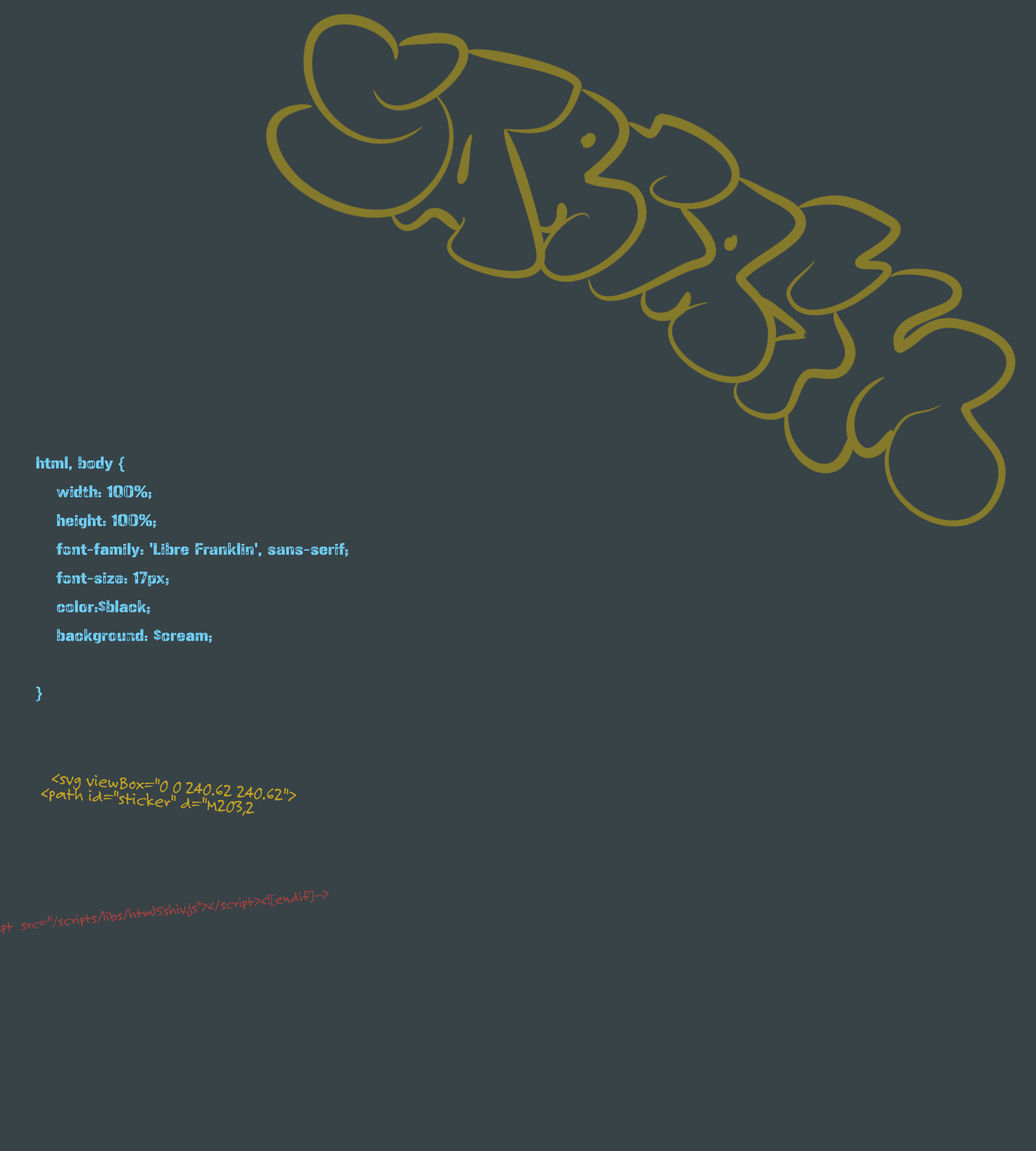
<style>
.page{position:relative;width:1036px;height:1151px;background:#384347}
.page>*{position:absolute;margin:0}
.t1{font:14.5px/27.6px "GunplayDamage-Regular";color:#71cff6;scale:1.11 1}
.t2{font:18.4px/15.4px "FeltTipRoman";color:#c2a223}
</style>
<div class="page">
<p class="t1" style="left:36px;top:456px;width:312px;height:246px">html, body {<br> width: 100%;<br> height: 100%;<br> font-family: 'Libre Franklin', sans-serif;<br> font-size: 17px;<br> color:$black;<br> background: $cream;<br><br>}</p>
<p class="t2" style="left:41px;top:774px;width:255px;height:42px;rotate:4deg">&lt;svg viewBox="0 0 240.62 240.62"&gt;<br>&lt;path id="sticker" d="M203,2</p>
</div>
